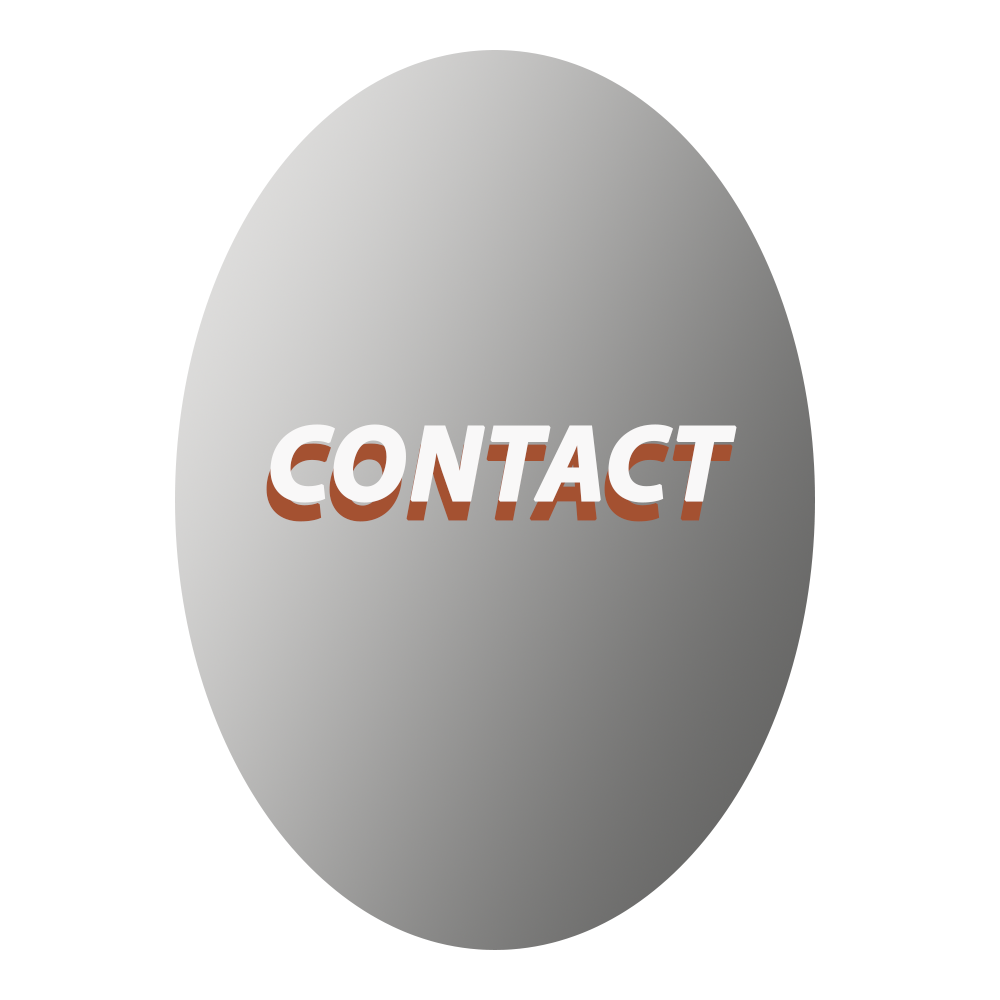
<style>
.page{position:relative;width:1000px;height:1000px;background:#ffffff}
.page>*{position:absolute;margin:0}
.t1{font:108.3px "MyriadPro-BoldIt";color:#f9f8f8;text-transform:uppercase;font-weight:bold}
.t2{font:125px "MyriadPro-Regular";color:#fdfdfc}
</style>
<div class="page">
<p class="t1" style="left:270px;top:424px;width:467px;height:79px"><span class="t2"><br><br><br></span>contact</p>
</div>
